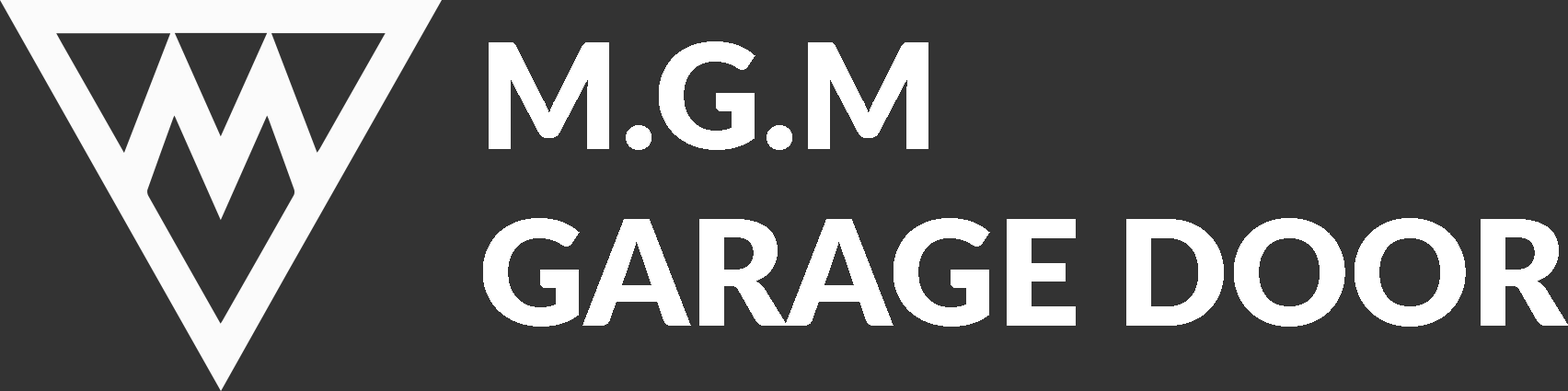
<style>
.page{position:relative;width:1568px;height:391px;background:#333333}
.page>*{position:absolute;margin:0}
.t1{font:147.4px "Lato-Black";letter-spacing:0.005em;color:#ffffff;text-transform:uppercase}
</style>
<div class="page">
<p class="t1" style="left:483px;top:41px;width:1086px;height:286px">M.G.M <br>Garage Door</p>
</div>
